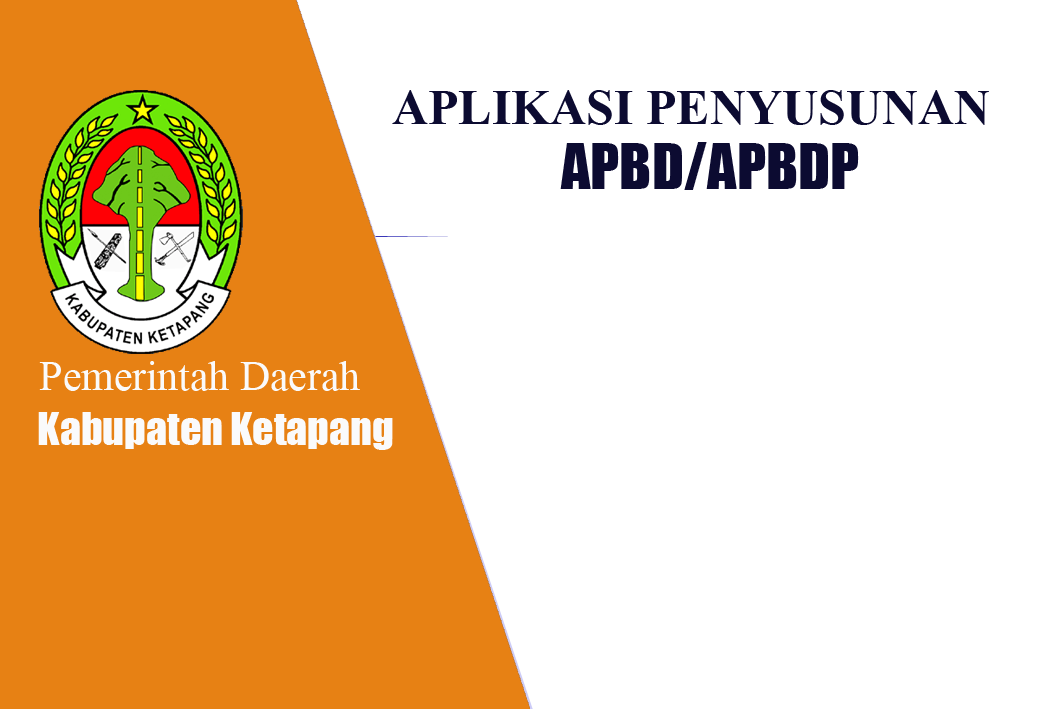
<style>
.page{position:relative;width:1063px;height:709px;background:#ffffff}
.page>*{position:absolute;margin:0}
.t1{font:50px "TimesNewRomanPS-BoldMT";color:#0c0b31}
.t2{font:58.3px "Impact";color:#0c0b31}
.t3{font:41.7px "TimesNewRomanPSMT";color:#fafafb}
.t4{font:41.7px "Impact";color:#fafafb}
</style>
<div class="page">
<p class="t1" style="left:392px;top:90px;width:597px;height:35px">APLIKASI PENYUSUNAN</p>
<p class="t2" style="left:560px;top:142px;width:299px;height:48px">APBD/APBDP</p>
<p class="t3" style="left:39px;top:361px;width:321px;height:30px">Pemerintah Daerah</p>
<p class="t4" style="left:38px;top:412px;width:355px;height:38px">Kabupaten Ketapang</p>
</div>
